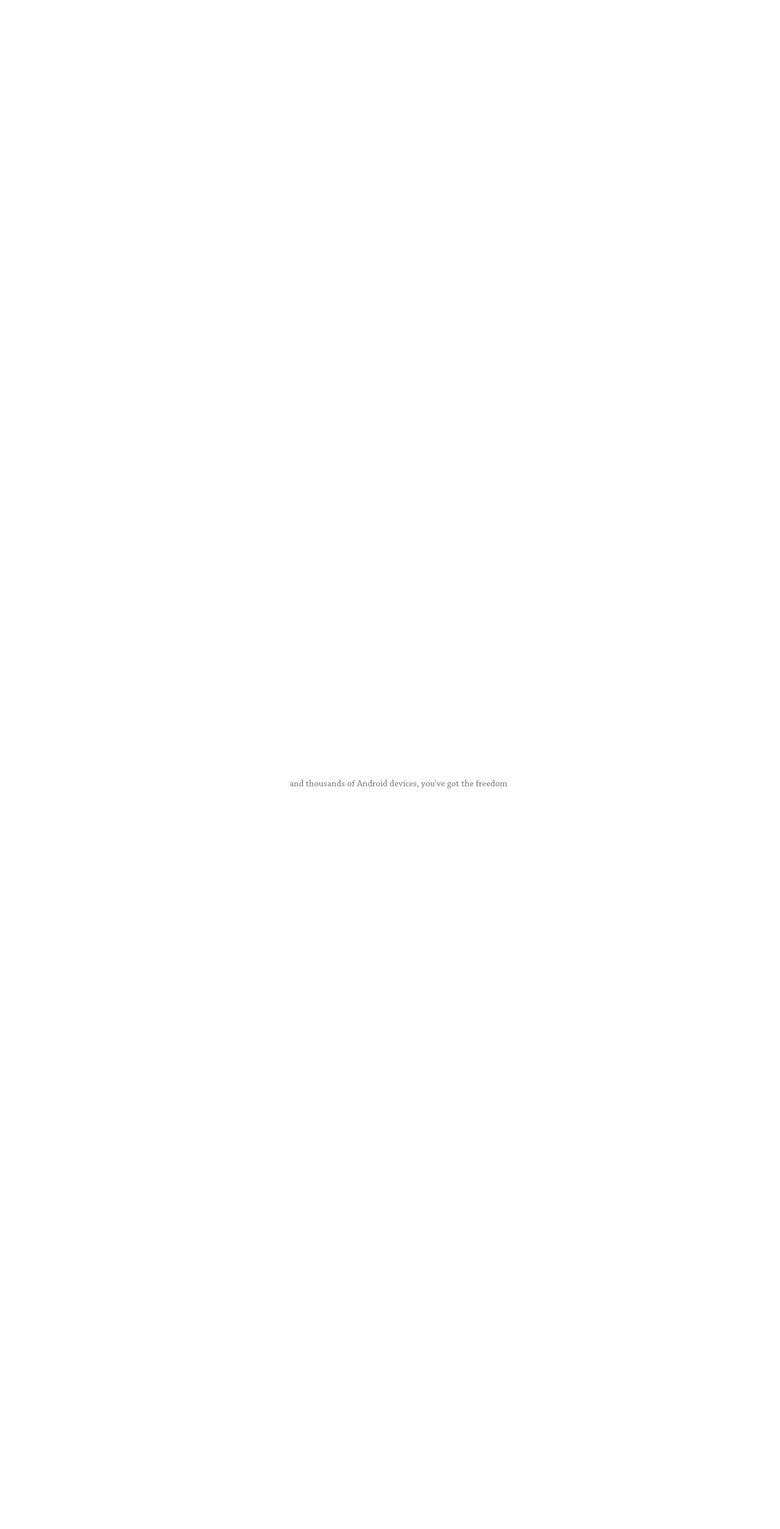
<style>
.page{position:relative;width:780px;height:1529px;background:#ffffff}
.page>*{position:absolute;margin:0}
.t1{font:9.1px "ChaparralPro-Regular";letter-spacing:0.005em;color:#7c7c7c}
</style>
<div class="page">
<p class="t1" style="left:290px;top:780px;width:217px;height:9px">and thousands of Android devices, you've got the freedom</p>
</div>
